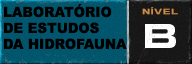
<style>
.page{position:relative;width:192px;height:64px}
.page>*{position:absolute;margin:0}
.t1{font:14.1px/16px "Arial-Black";color:#000000;text-transform:uppercase;scale:0.95 1}
.t2{font:7.8px "Arial-BoldMT";letter-spacing:0.02em;color:#ca8b47;text-transform:uppercase;scale:1.54 1}
</style>
<div class="page">
<p class="t1" style="left:4px;top:4px;width:123px;height:46px">laboratório<br>de estudos<br>da hidrofauna</p>
<p class="t2" style="left:142px;top:7px;width:36px;height:8px">nível</p>
</div>
